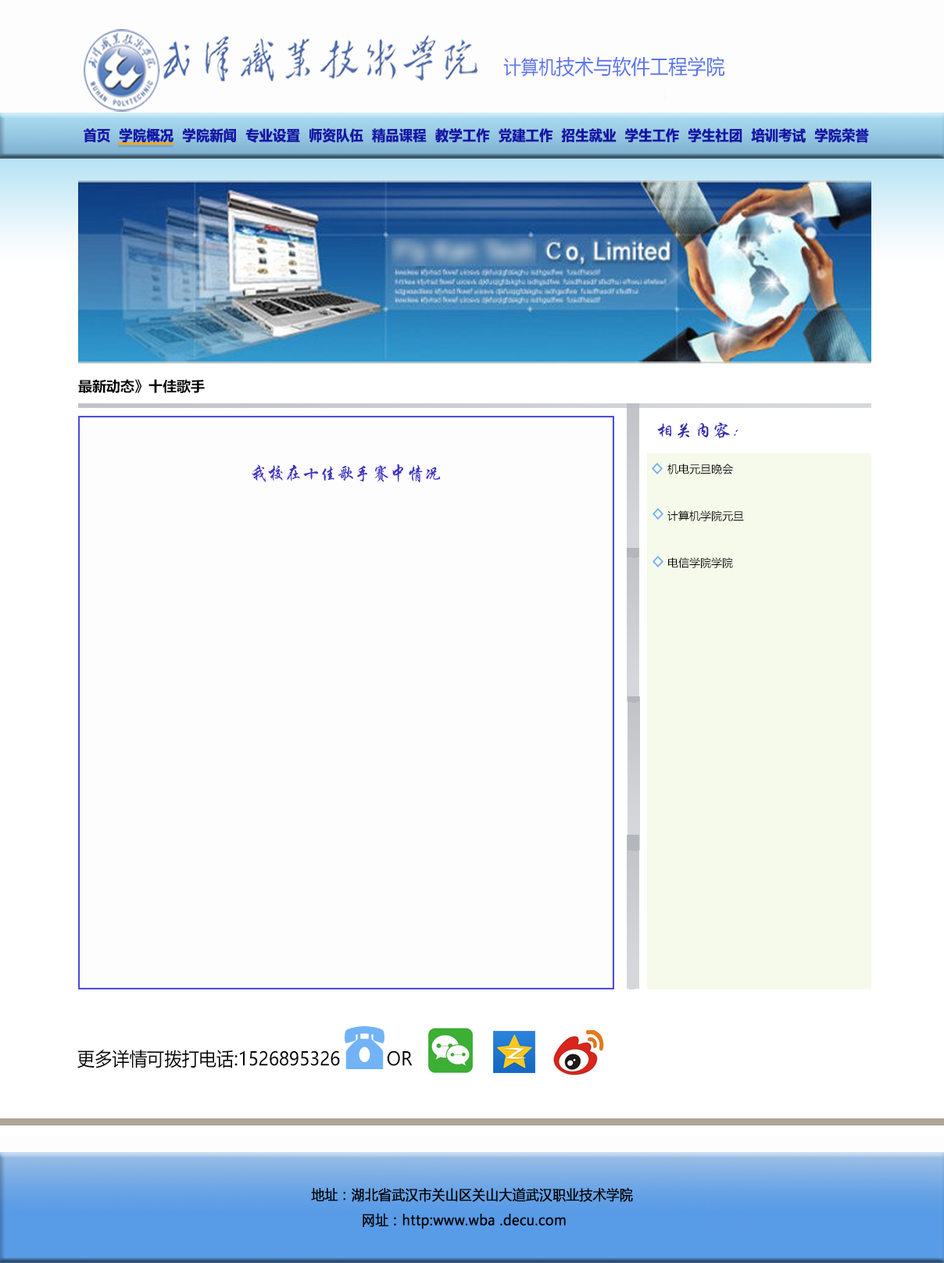
<style>
.page{position:relative;width:944px;height:1263px;background:#fefdfd}
.page>*{position:absolute;margin:0}
.t1{font:20.2px "MicrosoftYaHei";color:#5a75ea;scale:0.93 1}
.t2{font:18.8px "MicrosoftYaHei";color:#5a75ea;scale:0.93 1}
.t3{font:14.3px "MicrosoftYaHei-Bold";color:#1717a6;font-weight:bold;scale:0.93 1}
.t4{font:14.1px "MicrosoftYaHei-Bold";color:#020202}
.t5{font:18.8px "STXingkai";color:#342cb3}
.t6{font:18.8px "STXingkai";color:#4036c2;scale:0.93 1}
.t7{font:10.9px/23.4px "MicrosoftYaHei";color:#050505}
.t8{font:18.8px "MicrosoftYaHei";color:#020202;scale:0.93 1}
.t9{font:14.1px/25.3px "MicrosoftYaHei";color:#030304;font-weight:bold;scale:0.93 1}
</style>
<div class="page">
<p class="t1" style="left:503px;top:56px;width:222px;height:21px"><span class="t2">计算机</span>技术与软件工程学院</p>
<p class="t3" style="left:84px;top:128px;width:785px;height:15px">首页  学院概况  学院新闻  专业设置  师资队伍  精品课程  教学工作  党建工作  招生就业  学生工作  学生社团  培训考试  学院荣誉</p>
<p class="t4" style="left:78px;top:379px;width:127px;height:14px">最新动态》十佳歌手</p>
<p class="t5" style="left:657px;top:422px;width:81px;height:16px">相关内容：</p>
<p class="t6" style="left:252px;top:463px;width:189px;height:20px">我校在十佳歌手赛中情况</p>
<p class="t7" style="left:667px;top:463px;width:77px;height:105px">机电元旦晚会<br><br>计算机学院元旦<br><br>电信学院学院</p>
<p class="t8" style="left:77px;top:1050px;width:336px;height:18px">更多详情可拨打电话:1526895326         OR</p>
<p class="t9" style="left:311px;top:1187px;width:322px;height:42px">地址：湖北省武汉市关山区关山大道武汉职业技术学院<br>            网址：http:www.wba .decu.com</p>
</div>
